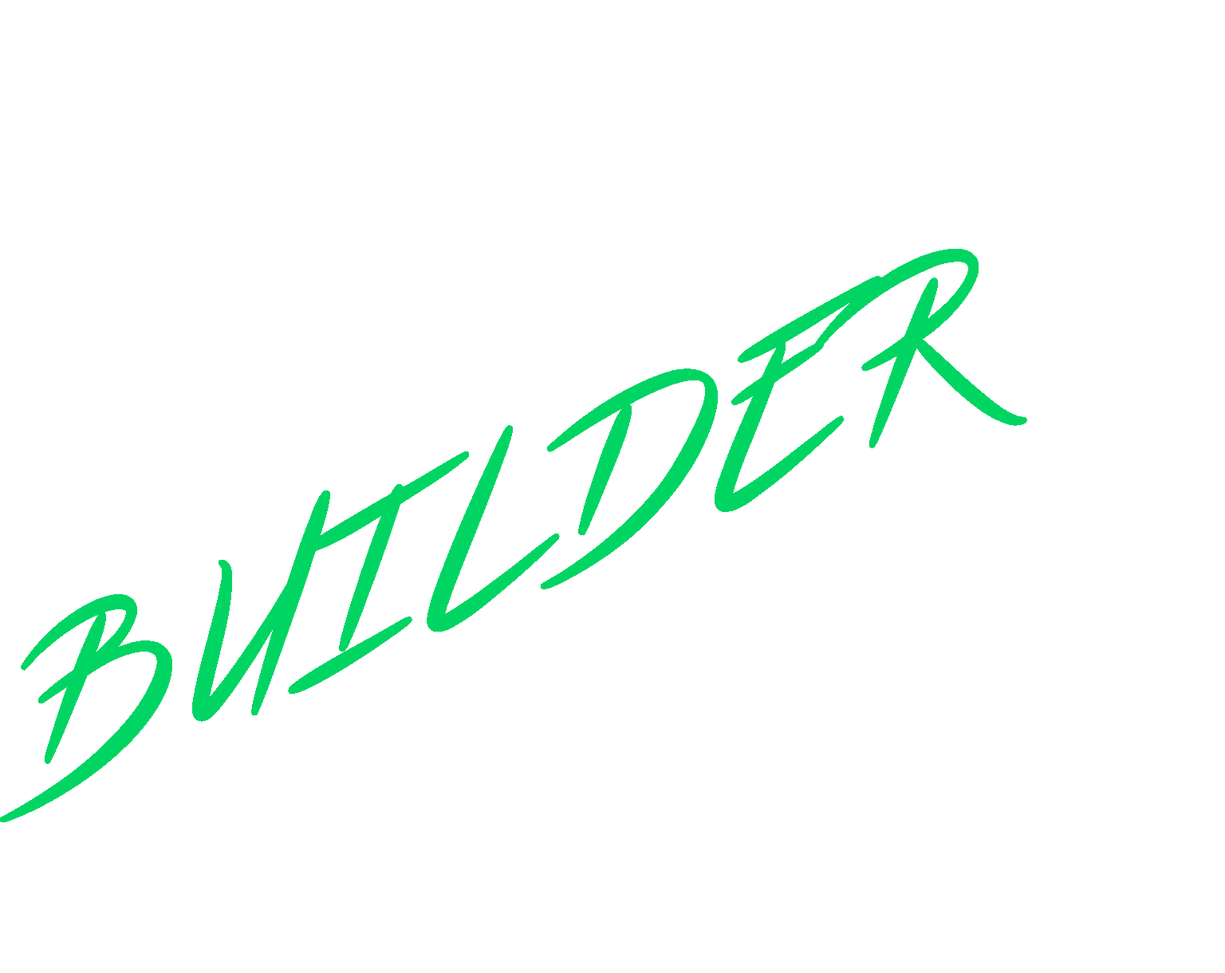
<style>
.page{position:relative;width:1225px;height:973px;background:#ffffff}
.page>*{position:absolute;margin:0}
.t1{font:142.9px "Streamster";color:#00d564;font-weight:bold;scale:1.12 1}
</style>
<div class="page">
<p class="t1" style="left:0px;top:249px;width:1027px;height:573px;rotate:-22deg">BUILDER</p>
</div>
